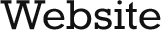
<style>
.page{position:relative;width:161px;height:30px;background:#ffffff}
.page>*{position:absolute;margin:0}
.t1{font:51px "Rokkitt";color:#121212}
</style>
<div class="page">
<p class="t1" style="left:0px;top:0px;width:161px;height:30px">Website</p>
</div>
